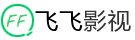
<style>
.page{position:relative;width:135px;height:40px;background:#ffffff}
.page>*{position:absolute;margin:0}
.t1{font:17px "MVBoli";letter-spacing:0.05em;color:#33cc66}
.t2{font:23px "MicrosoftYaHei";letter-spacing:0.05em;color:#000000}
.t3{font:23px "MicrosoftYaHei";letter-spacing:0.05em;color:#333333}
</style>
<div class="page">
<p class="t1" style="left:7px;top:14px;width:21px;height:13px">FF</p>
<p class="t2" style="left:35px;top:9px;width:96px;height:23px">飞飞<span class="t3">影视</span></p>
</div>
